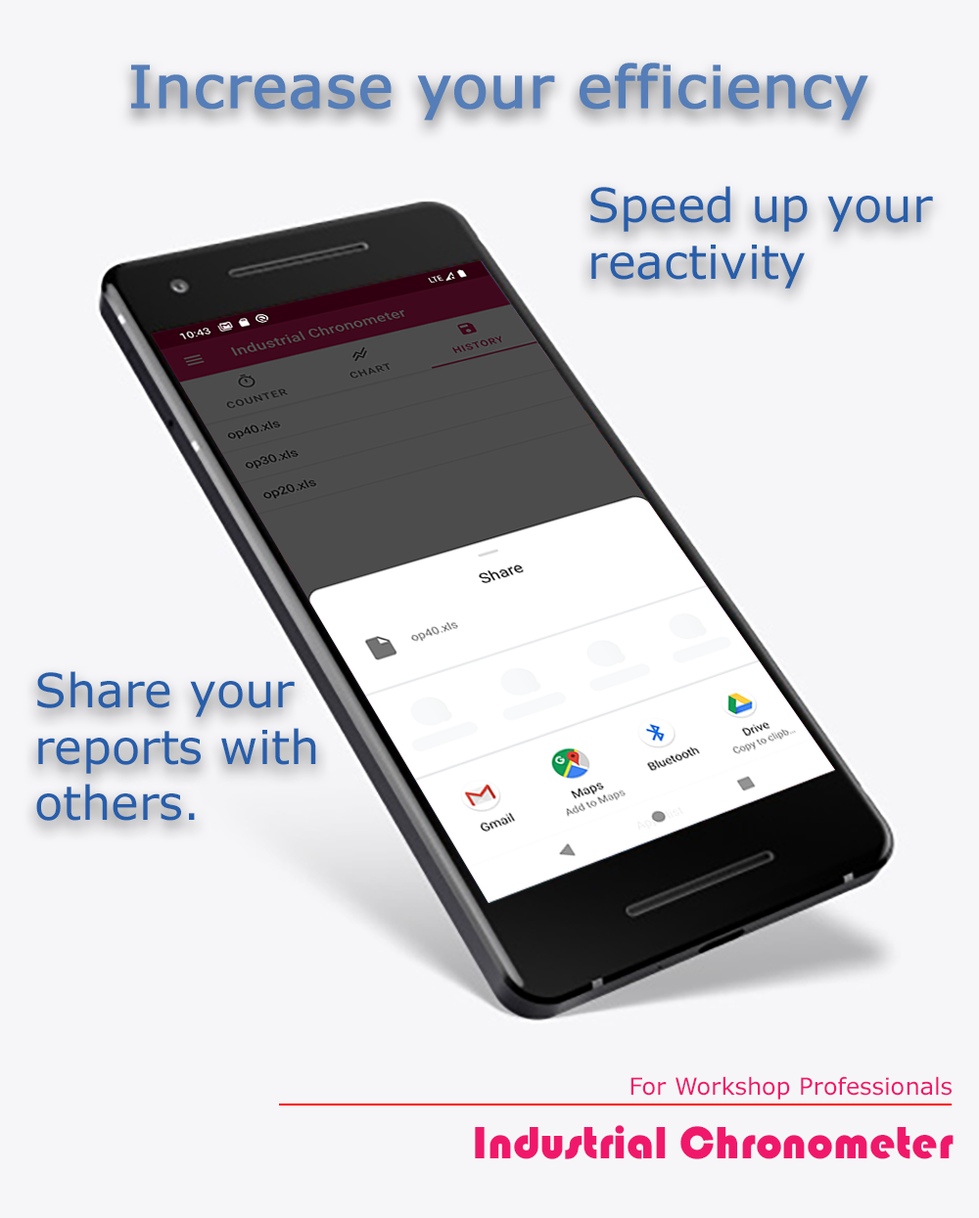
<style>
.page{position:relative;width:979px;height:1218px;background:#f6f6f8}
.page>*{position:absolute;margin:0}
.t1{font:58.7px "MSReferenceSansSerif";color:#557eb8;font-weight:bold}
.t2{font:47px "MSReferenceSansSerif";color:#275eaa}
.t3{font:23.5px "MSReferenceSansSerif";color:#f0186a}
.t4{font:47px "Bauhaus93";color:#f0186a}
</style>
<div class="page">
<p class="t1" style="left:131px;top:63px;width:737px;height:57px">Increase your efficiency</p>
<p class="t2" style="left:590px;top:186px;width:343px;height:103px">Speed up your reactivity</p>
<p class="t2" style="left:36px;top:671px;width:280px;height:150px">Share your reports with others.</p>
<p class="t3" style="left:630px;top:1077px;width:321px;height:23px">For Workshop Professionals</p>
<p class="t4" style="left:475px;top:1125px;width:478px;height:35px">Industrial Chronometer</p>
</div>
